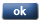
<style>
.page{position:relative;width:40px;height:23px;background:#ffffff}
.page>*{position:absolute;margin:0}
.t1{font:12px "MyriadPro-Regular";color:#ffffff;font-weight:bold}
</style>
<div class="page">
<p class="t1" style="left:13px;top:6px;width:14px;height:10px">ok</p>
</div>
